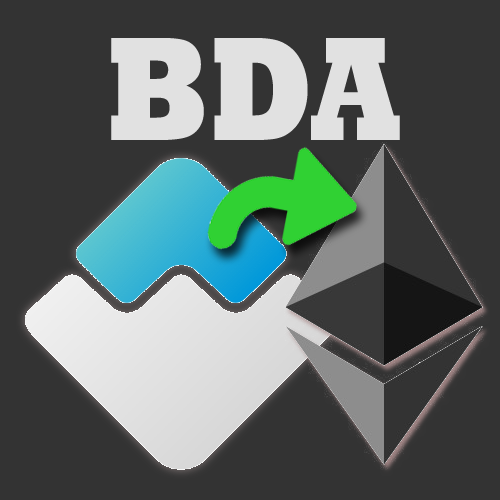
<style>
.page{position:relative;width:500px;height:500px;background:#333333}
.page>*{position:absolute;margin:0}
.t1{font:150px "Rockwell-ExtraBold";color:#e1e1e1;scale:0.8 1}
</style>
<div class="page">
<p class="t1" style="left:111px;top:38px;width:289px;height:102px">BDA</p>
</div>
